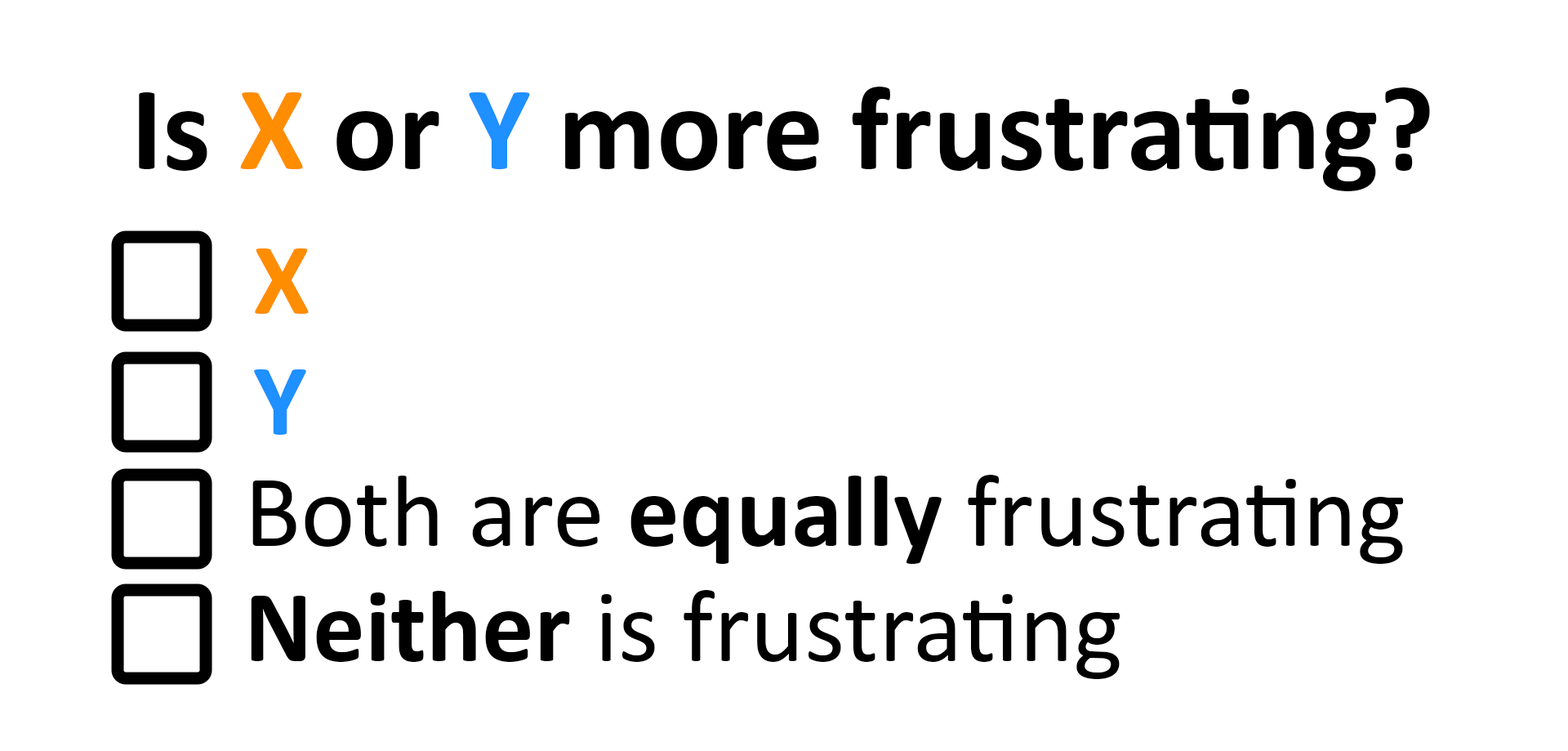
<style>
.page{position:relative;width:1568px;height:751px;background:#ffffff}
.page>*{position:absolute;margin:0}
.t1{font:121px "Calibri-Bold";color:#000000}
.t2{font:121px "Calibri-Bold";color:#ff8d01}
.t3{font:121px "Calibri-Bold";color:#1e90ff}
.t4{font:103.7px "Calibri-Bold";color:#ff8d01}
.t5{font:103.7px "Calibri-Bold";color:#1e90ff}
.t6{font:103.7px "Calibri";color:#000000}
.t7{font:103.7px "Calibri-Bold";color:#000000}
</style>
<div class="page">
<p class="t1" style="left:139px;top:87px;width:1291px;height:104px">Is <span class="t2">X</span> or <span class="t3">Y</span> more frustrating?</p>
<p class="t4" style="left:255px;top:248px;width:54px;height:66px">X</p>
<p class="t5" style="left:254px;top:369px;width:52px;height:65px">Y</p>
<p class="t6" style="left:252px;top:474px;width:1152px;height:90px">Both are <span class="t7">equally </span>frustrating</p>
<p class="t6" style="left:251px;top:590px;width:869px;height:89px"><span class="t7">Neither </span>is frustrating</p>
</div>
